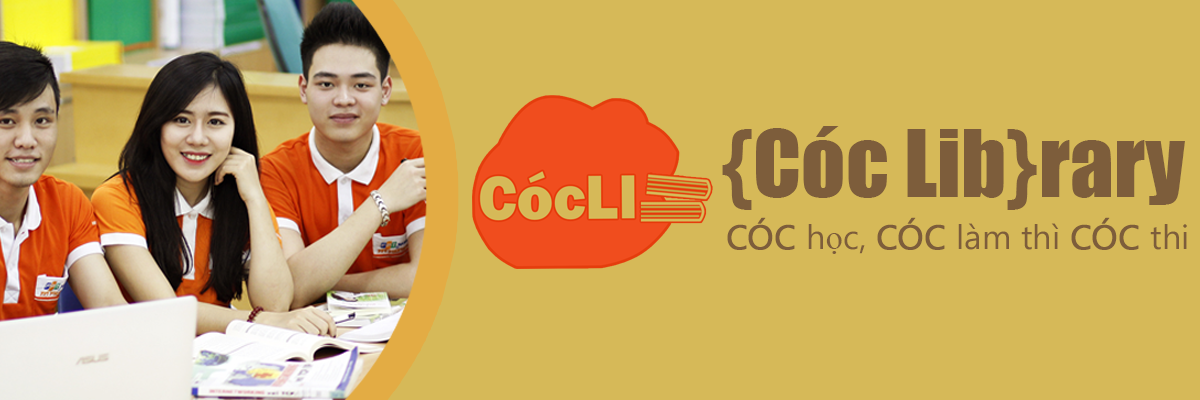
<style>
.page{position:relative;width:1200px;height:400px;background:#d6b958}
.page>*{position:absolute;margin:0}
.t1{font:86.5px "Impact";color:#7d5d3b}
.t2{font:33.7px "Gadugi";color:#7d5d3b}
.t3{font:33.7px "Gadugi";color:#7d5d3b;font-weight:bold}
.t4{font:33.7px "TimesNewRomanPSMT";color:#7d5d3b}
</style>
<div class="page">
<p class="t1" style="left:722px;top:126px;width:463px;height:84px">{Cóc Lib}rary</p>
<p class="t2" style="left:727px;top:217px;width:460px;height:37px"><span class="t3">CÓC </span>h<span class="t4">ọ</span>c, <span class="t3">CÓC </span>làm thì <span class="t3">CÓC </span>thi</p>
</div>
